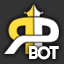
<style>
.page{position:relative;width:64px;height:64px;background:#333333}
.page>*{position:absolute;margin:0}
.t1{font:18px "Guaraldo";letter-spacing:-0.025em;color:#ffffff;text-transform:uppercase}
</style>
<div class="page">
<p class="t1" style="left:29px;top:46px;width:30px;height:14px">BOT</p>
</div>
